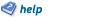
<style>
.page{position:relative;width:100px;height:18px;background:#ffffff}
.page>*{position:absolute;margin:0}
.t1{font:11px "Trebuchet-BoldItalic";color:#006699}
</style>
<div class="page">
<p class="t1" style="left:20px;top:4px;width:22px;height:12px">help</p>
</div>
